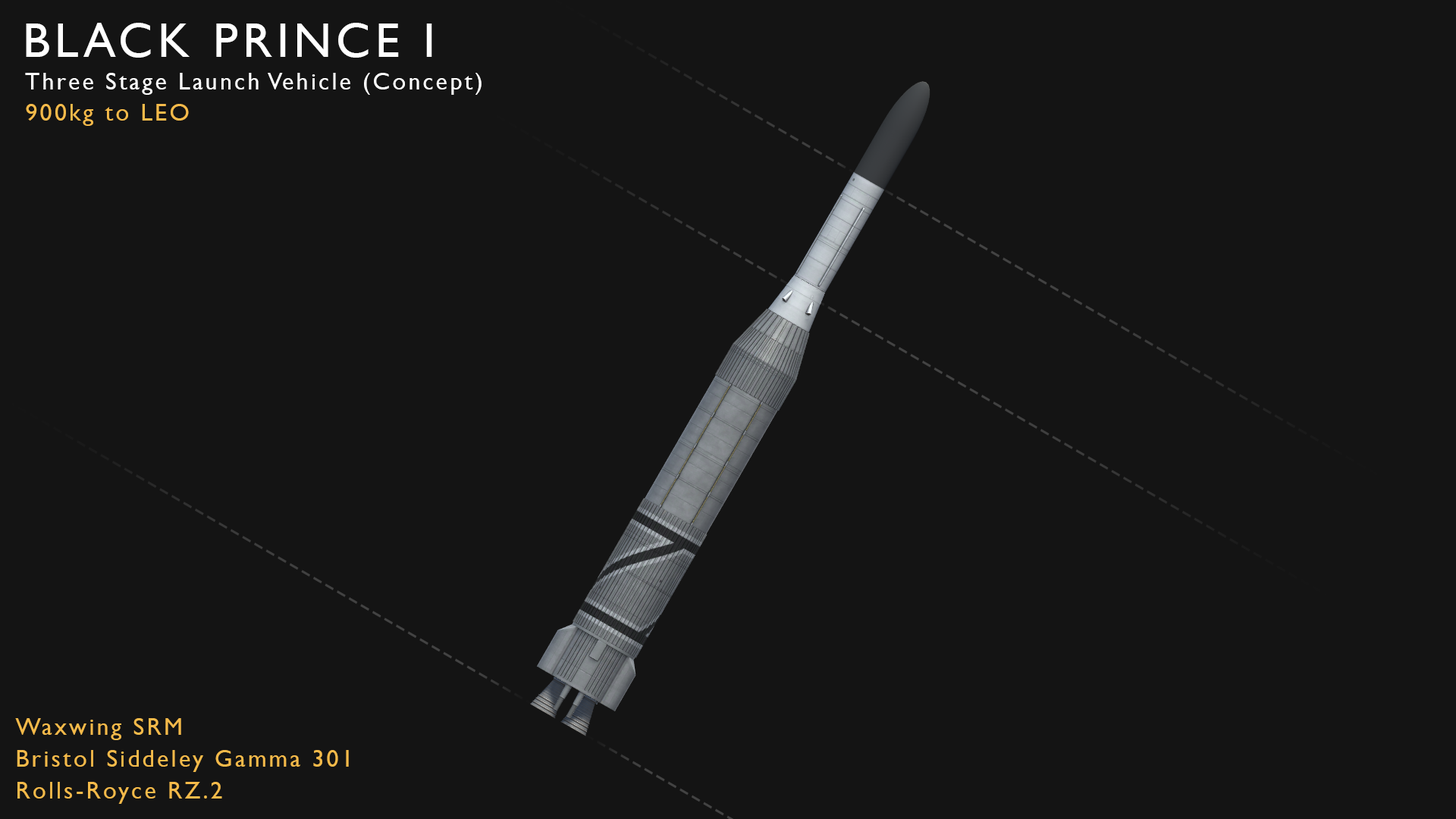
<style>
.page{position:relative;width:1456px;height:819px;background:#141414}
.page>*{position:absolute;margin:0}
.t1{font:48.5px "GillSansMT";letter-spacing:0.1em;color:#ffffff}
.t2{font:24.3px "GillSansMT";letter-spacing:0.1em;color:#ffffff}
.t3{font:24.3px "GillSansMT";letter-spacing:0.1em;color:#f4ba4a}
</style>
<div class="page">
<p class="t1" style="left:26px;top:23px;width:406px;height:35px">BLACK PRINCE I</p>
<p class="t2" style="left:25px;top:73px;width:457px;height:22px">Three Stage Launch Vehicle (Concept)</p>
<p class="t3" style="left:26px;top:104px;width:163px;height:22px">900kg to LEO</p>
<p class="t3" style="left:15px;top:718px;width:166px;height:22px">Waxwing SRM</p>
<p class="t3" style="left:17px;top:750px;width:332px;height:22px">Bristol Siddeley Gamma 301</p>
<p class="t3" style="left:17px;top:782px;width:205px;height:22px">Rolls-Royce RZ.2</p>
</div>
